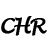
<style>
.page{position:relative;width:48px;height:48px;background:#ffffff}
.page>*{position:absolute;margin:0}
.t1{font:20.8px "LucidaHandwriting-Italic";letter-spacing:-0.1em;color:#000000;font-weight:bold}
</style>
<div class="page">
<p class="t1" style="left:1px;top:16px;width:46px;height:20px">CHR</p>
</div>
